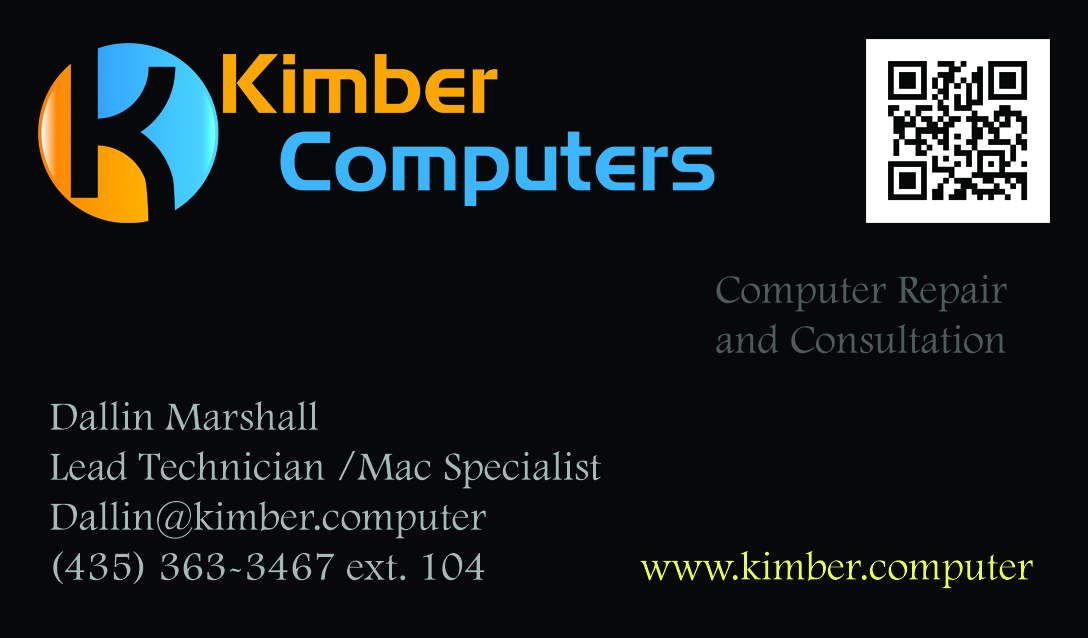
<style>
.page{position:relative;width:1088px;height:638px;background:#070809}
.page>*{position:absolute;margin:0}
.t1{font:41.7px "FootlightMTLight";color:#4c5a5c}
.t2{font:41.7px "FootlightMTLight";color:#a6b9b9}
.t3{font:41.7px "FootlightMTLight";color:#e8ff4e}
</style>
<div class="page">
<p class="t1" style="left:716px;top:275px;width:291px;height:79px">Computer Repair<br>and Consultation</p>
<p class="t2" style="left:50px;top:401px;width:551px;height:184px">Dallin Marshall<br>Lead Technician /Mac Specialist<br>Dallin@kimber.computer<br>(435) 363-3467 ext. 104</p>
<p class="t3" style="left:640px;top:550px;width:393px;height:39px">www.kimber.computer</p>
</div>
